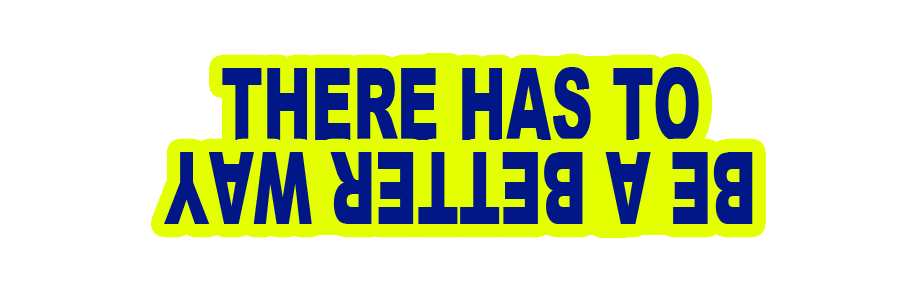
<style>
.page{position:relative;width:900px;height:300px;background:#ffffff}
.page>*{position:absolute;margin:0}
.t1{font:100.8px "Arial-Black";color:#011787;scale:0.57 1}
</style>
<div class="page">
<p class="t1" style="left:222px;top:67px;width:477px;height:74px">THERE HAS TO</p>
<p class="t1" style="left:164px;top:152px;width:589px;height:72px;rotate:180deg">BE A BETTER WAY</p>
</div>
